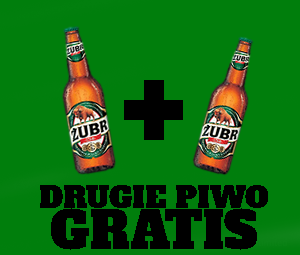
<style>
.page{position:relative;width:300px;height:255px;background:#007e0c}
.page>*{position:absolute;margin:0}
.t1{font:120px "AlfaSlabOne-Regular";color:#000000}
.t2{font:30px "AlfaSlabOne-Regular";color:#000000}
.t3{font:50px "AlfaSlabOne-Regular";color:#000000}
</style>
<div class="page">
<p class="t1" style="left:124px;top:80px;width:59px;height:60px">+</p>
<p class="t2" style="left:40px;top:185px;width:228px;height:23px">DRUGIE PIWO</p>
<p class="t3" style="left:51px;top:208px;width:206px;height:42px">GRATIS</p>
</div>
